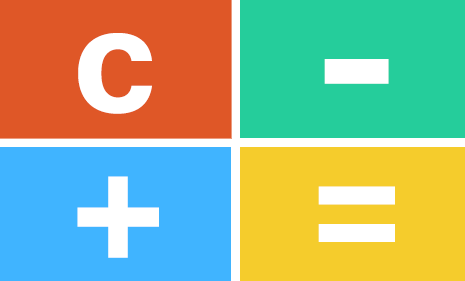
<style>
.page{position:relative;width:465px;height:281px;background:#25cd9b}
.page>*{position:absolute;margin:0}
.t1{font:191px "Tunga-Bold";color:#ffffff}
.t2{font:215px "Tunga-Bold";color:#ffffff}
.t3{font:201px "Tunga-Bold";color:#ffffff}
</style>
<div class="page">
<p class="t1" style="left:78px;top:33px;width:74px;height:81px">c</p>
<p class="t2" style="left:77px;top:176px;width:82px;height:82px">+</p>
<p class="t3" style="left:318px;top:186px;width:77px;height:56px">=</p>
</div>
